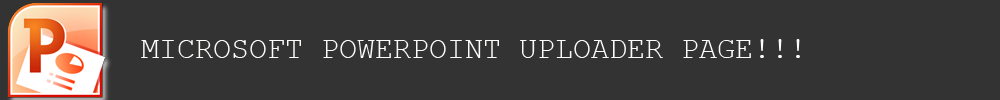
<style>
.page{position:relative;width:1000px;height:100px;background:#333333}
.page>*{position:absolute;margin:0}
.t1{font:30px "CourierNewPSMT";color:#fcfdfb}
</style>
<div class="page">
<p class="t1" style="left:141px;top:39px;width:659px;height:19px">MICROSOFT POWERPOINT UPLOADER PAGE!!!</p>
</div>
